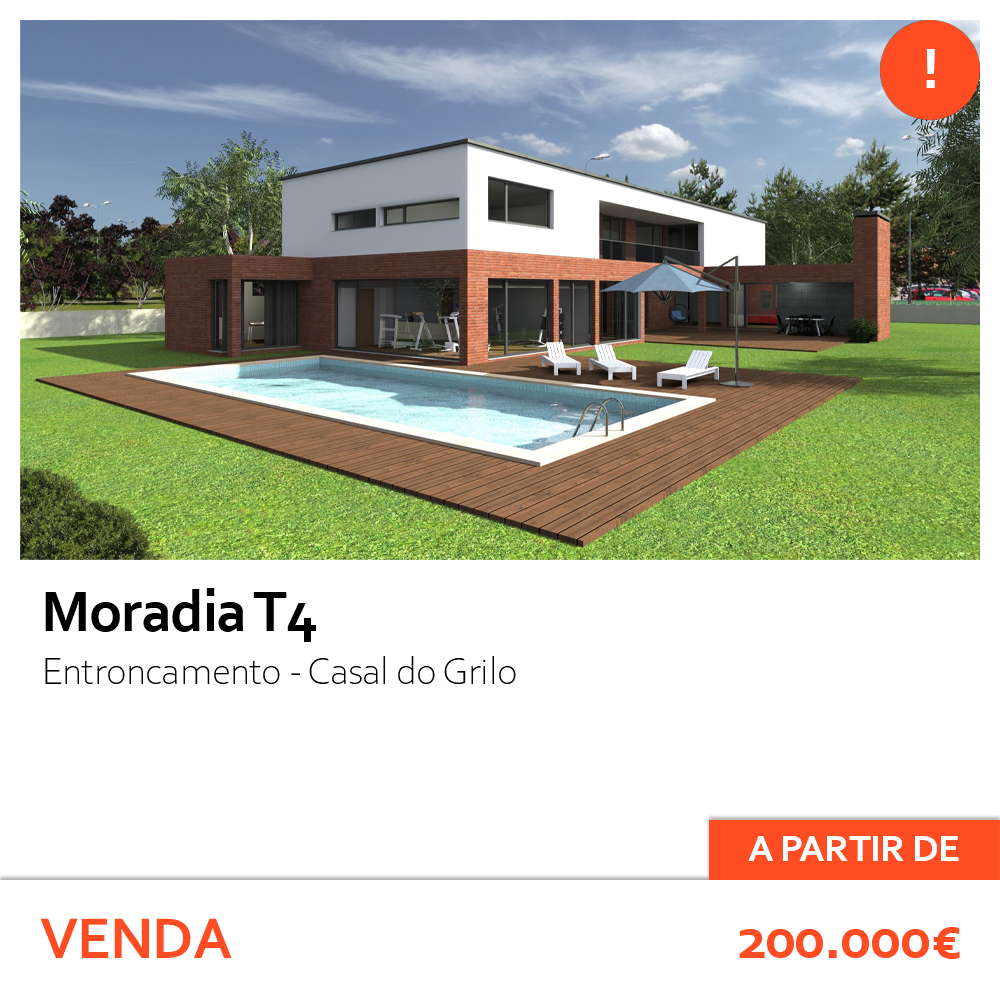
<style>
.page{position:relative;width:1000px;height:1000px;background:#ffffff}
.page>*{position:absolute;margin:0}
.t1{font:60px "Corbel-Bold";letter-spacing:-0.02em;color:#ffffff}
.t2{font:60px "Corbel-Bold";letter-spacing:-0.02em;color:#000000}
.t3{font:40px "CorbelLight";letter-spacing:-0.02em;color:#000000}
.t4{font:39px "Corbel-Bold";letter-spacing:-0.02em;color:#ffffff}
.t5{font:60px "Corbel-Bold";letter-spacing:-0.02em;color:#ff4d23}
</style>
<div class="page">
<p class="t1" style="left:926px;top:49px;width:9px;height:39px">!</p>
<p class="t2" style="left:45px;top:588px;width:271px;height:54px">Moradia T4</p>
<p class="t3" style="left:45px;top:656px;width:471px;height:28px">Entroncamento - Casal do Grilo</p>
<p class="t4" style="left:748px;top:836px;width:211px;height:25px">A PARTIR DE</p>
<p class="t5" style="left:40px;top:918px;width:192px;height:40px">VENDA</p>
<p class="t5" style="left:739px;top:927px;width:221px;height:32px">200.000€</p>
</div>
